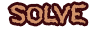
<style>
.page{position:relative;width:94px;height:29px;background:#ffffff}
.page>*{position:absolute;margin:0}
.t1{font:24px "TOBACCO";color:#c4845a;font-weight:bold}
</style>
<div class="page">
<p class="t1" style="left:10px;top:4px;width:76px;height:20px">SOLVE</p>
</div>
